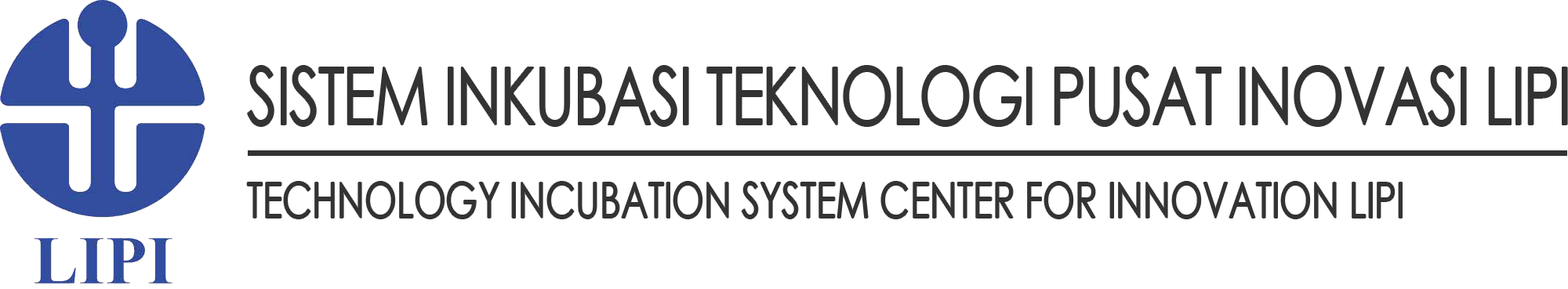
<style>
.page{position:relative;width:1568px;height:289px;background:#ffffff}
.page>*{position:absolute;margin:0}
.t1{font:80px "CenturyGothic";letter-spacing:-0.025em;color:#333333;scale:0.76 1}
.t2{font:80px "CenturyGothic";color:#333333;scale:0.76 1}
.t3{font:48.3px "CenturyGothic";color:#333333;scale:0.76 1}
</style>
<div class="page">
<p class="t1" style="left:248px;top:66px;width:1319px;height:60px"><span class="t2">S</span>ISTEM INKUBASI TEKNOLOGI PUSAT INOVASI LIPI</p>
<p class="t3" style="left:247px;top:182px;width:1155px;height:37px">TECHNOLOGY INCUBATION SYSTEM CENTER FOR INNOVATION LIPI</p>
</div>
